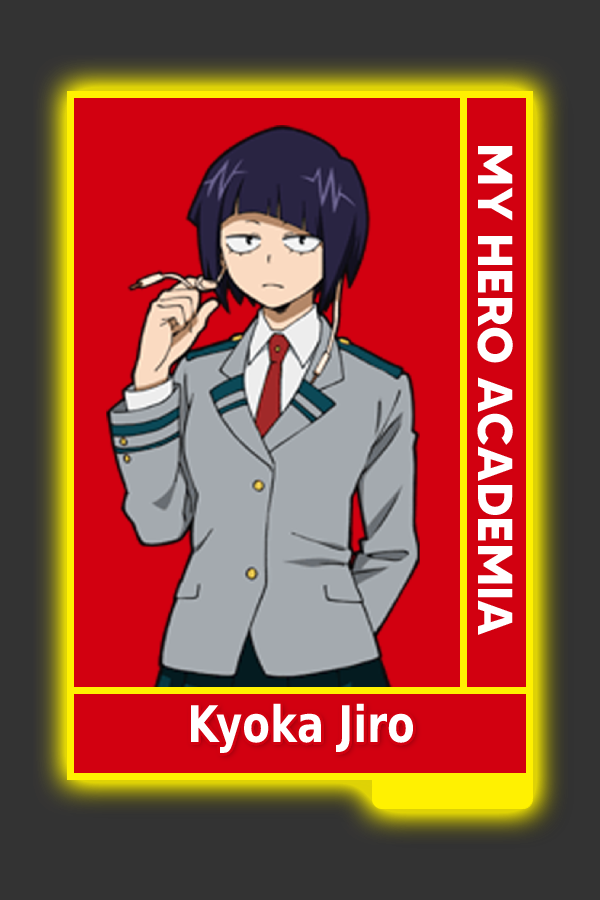
<style>
.page{position:relative;width:600px;height:900px;background:#d20010}
.page>*{position:absolute;margin:0}
.t1{font:48.8px "MADETOMMY-Bold";color:#ffffff}
.t2{font:50.5px "MADETOMMY-Bold";color:#ffffff;scale:0.8 1}
</style>
<div class="page">
<p class="t1" style="left:477px;top:146px;width:36px;height:489px;rotate:90deg">MY HERO ACADEMIA</p>
<p class="t2" style="left:190px;top:703px;width:224px;height:50px">Kyoka Jiro</p>
</div>
